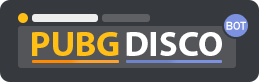
<style>
.page{position:relative;width:259px;height:82px;background:#36393e}
.page>*{position:absolute;margin:0}
.t1{font:11.8px "FranklinGothic-Medium";color:#ffffff}
.t2{font:35.3px "MyriadPro-Bold";color:#ffc015}
.t3{font:35.3px "MyriadPro-Bold";color:#ffffff}
</style>
<div class="page">
<p class="t1" style="left:226px;top:21px;width:20px;height:9px">BOT</p>
<p class="t2" style="left:32px;top:32px;width:87px;height:24px">PUBG</p>
<p class="t3" style="left:126px;top:32px;width:96px;height:24px">DISCO</p>
</div>
